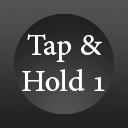
<style>
.page{position:relative;width:128px;height:128px}
.page>*{position:absolute;margin:0}
.t1{font:30px "AdobeHebrew-Regular";color:#ffffff}
</style>
<div class="page">
<p class="t1" style="left:22px;top:34px;width:83px;height:57px;text-align:center">Tap &amp;<br>Hold 1</p>
</div>
